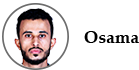
<style>
.page{position:relative;width:139px;height:70px;background:#ffffff}
.page>*{position:absolute;margin:0}
.t1{font:17.4px "PalatinoLinotype-Bold";color:#000000}
</style>
<div class="page">
<p class="t1" style="left:84px;top:31px;width:55px;height:12px">Osama</p>
</div>
